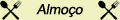
<style>
.page{position:relative;width:120px;height:20px;background:#f0f2c1}
.page>*{position:absolute;margin:0}
.t1{font:14px "ArialMT";letter-spacing:-0.01em;color:#000000;font-style:italic}
</style>
<div class="page">
<p class="t1" style="left:36px;top:4px;width:47px;height:13px">Almoço</p>
</div>
